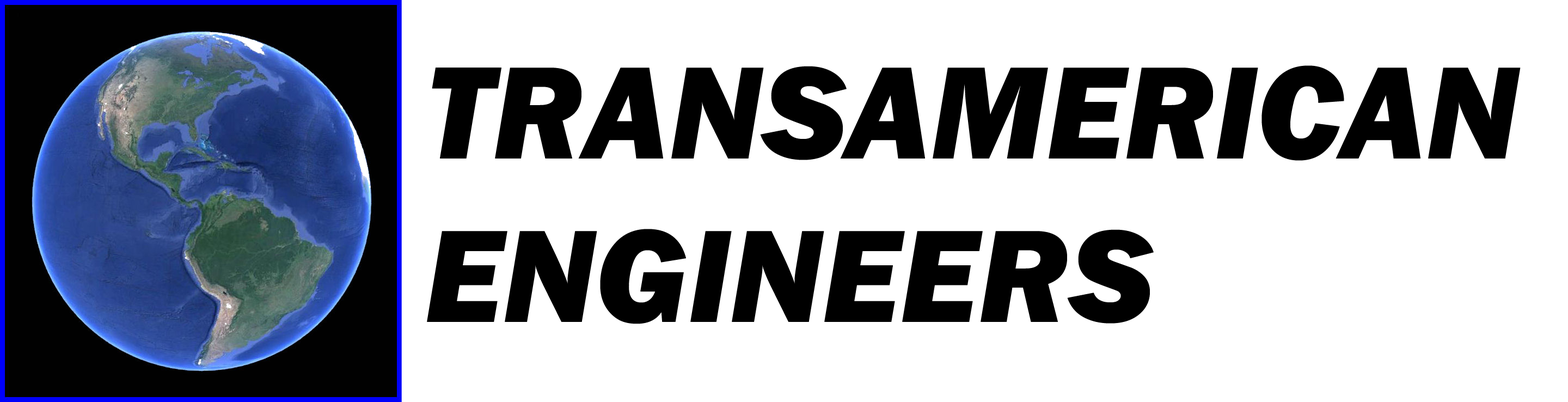
<style>
.page{position:relative;width:1568px;height:402px;background:#ffffff}
.page>*{position:absolute;margin:0}
.t1{font:136.1px "FranklinGothic-HeavyItalic";color:#000000}
</style>
<div class="page">
<p class="t1" style="left:427px;top:65px;width:1094px;height:259px">TRANSAMERICAN<br>ENGINEERS</p>
</div>
